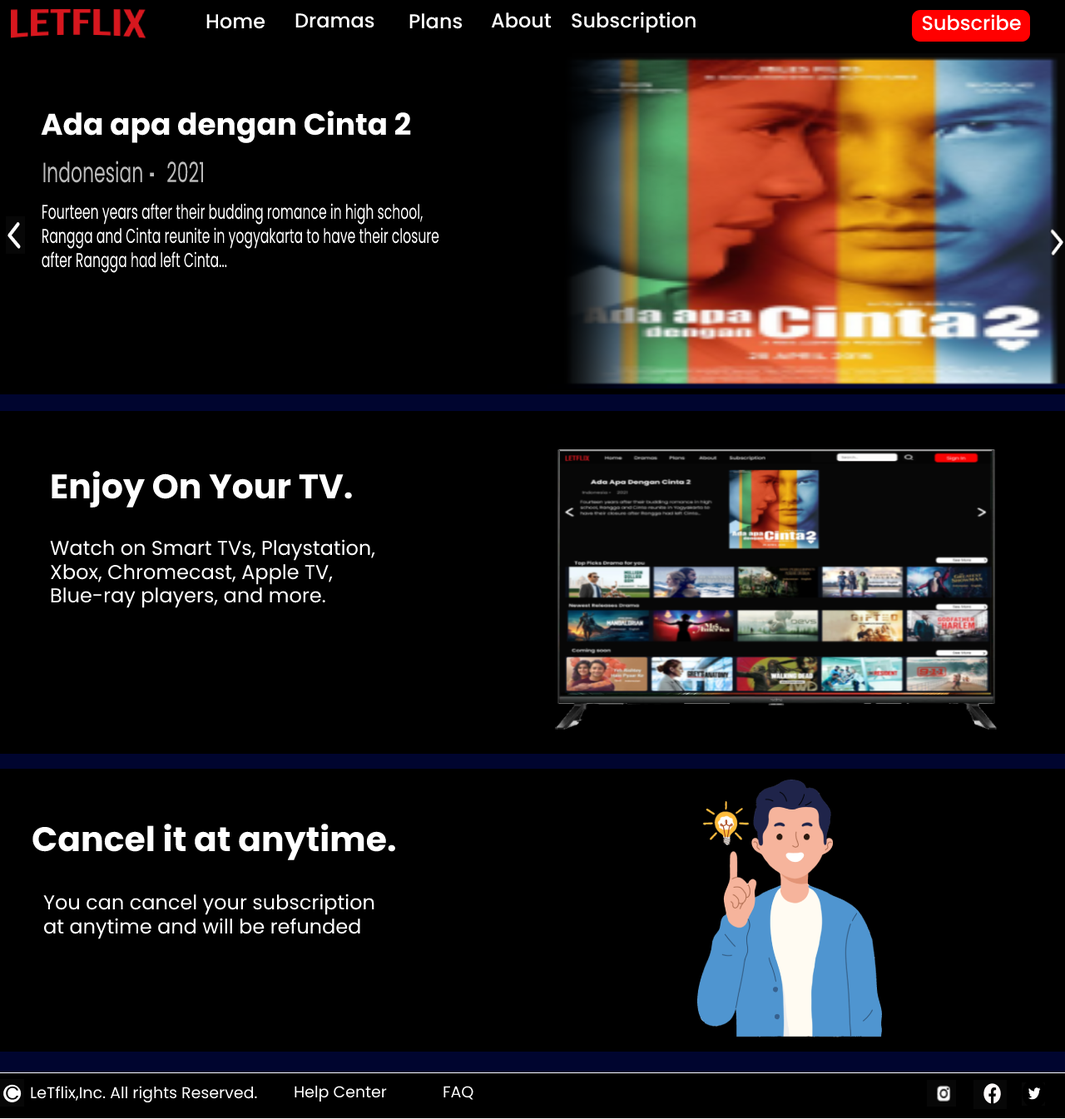
<style>
.page{position:relative;width:1065px;height:1119px;background:#000000}
.page>*{position:absolute;margin:0}
.t1{font:20px "Poppins-Medium";color:#ffffff}
.t2{font:30px "Poppins-Bold";color:#ffffff}
.t3{font:28px "Poppins-Regular";color:#bababa;scale:0.65 1}
.t4{font:29.7px "DejaVuSans";color:#bababa;scale:1.29 1}
.t5{font:20.1px "Poppins-Regular";color:#ffffff;scale:0.65 1}
.t6{font:34.1px "Poppins-Bold";color:#ffffff}
.t7{font:20px "Poppins-Regular";color:#ffffff}
.t8{font:15.8px "Poppins-Regular";color:#ffffff}
</style>
<div class="page">
<p class="t1" style="left:206px;top:14px;width:59px;height:15px">Home</p>
<p class="t1" style="left:295px;top:13px;width:80px;height:15px">Dramas</p>
<p class="t1" style="left:409px;top:13px;width:54px;height:16px">Plans</p>
<p class="t1" style="left:491px;top:12px;width:61px;height:16px">About</p>
<p class="t1" style="left:572px;top:12px;width:124px;height:21px">Subscription</p>
<p class="t1" style="left:922px;top:14px;width:99px;height:17px">Subscribe</p>
<p class="t2" style="left:41px;top:111px;width:370px;height:32px">Ada apa dengan Cinta 2</p>
<p class="t3" style="left:43px;top:161px;width:160px;height:22px">Indonesian   2021</p>
<p class="t4" style="left:150px;top:172px;width:4px;height:4px">.</p>
<p class="t5" style="left:42px;top:203px;width:397px;height:70px">Fourteen years after their budding romance in high school, Rangga and Cinta reunite in yogyakarta to have their closure after Rangga had left Cinta...</p>
<p class="t6" style="left:52px;top:471px;width:300px;height:37px">Enjoy On Your TV.</p>
<p class="t7" style="left:50px;top:539px;width:325px;height:69px">Watch on Smart TVs, Playstation, Xbox, Chromecast, Apple TV, Blue-ray players, and more.</p>
<p class="t6" style="left:32px;top:824px;width:363px;height:37px">Cancel it at anytime.</p>
<p class="t7" style="left:43px;top:894px;width:332px;height:46px">You can cancel your subscription at anytime and will be refunded</p>
<p class="t8" style="left:295px;top:1085px;width:92px;height:17px">Help Center</p>
<p class="t8" style="left:31px;top:1086px;width:226px;height:18px">LeTflix,Inc. All rights Reserved.</p>
<p class="t8" style="left:444px;top:1086px;width:30px;height:14px">FAQ</p>
</div>
